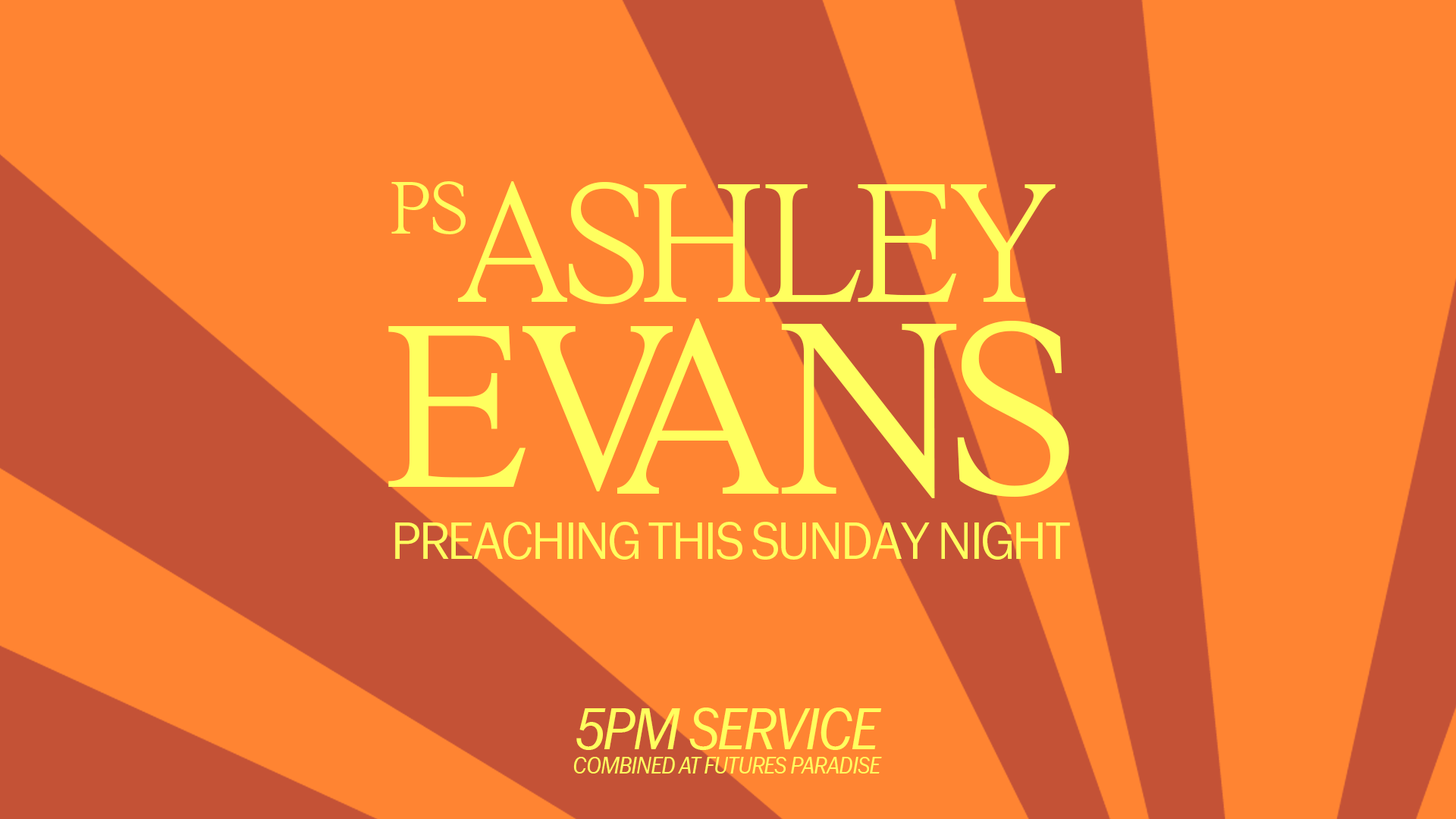
<style>
.page{position:relative;width:1456px;height:819px;background:#ff8432}
.page>*{position:absolute;margin:0}
.t1{font:275.6px/79.7px "RyhmesText-UltraLight";letter-spacing:-0.04em;color:#ffff5f}
.t2{font:378.3px/150.6px "RyhmesText-Light";letter-spacing:-0.02em;color:#ffff5f}
.t3{font:398.8px/150.6px "RyhmesText-Light";letter-spacing:-0.04em;color:#ffff5f}
.t4{font:121.8px "RyhmesText-UltraLight";letter-spacing:-0.04em;color:#ffff5f}
.t5{font:53.8px "GalGothic-Regular";letter-spacing:-0.04em;color:#ffff5f;scale:0.96 1}
.t6{font:104.2px "GalGothic-Italic";letter-spacing:-0.04em;color:#ffff5f}
.t7{font:41.7px "GalGothic-Italic";letter-spacing:-0.04em;color:#ffff5f}
</style>
<div class="page">
<p class="t1" style="left:388px;top:181px;width:681px;height:317px;text-align:center">ASHLEY <br><span class="t2">EV</span><span class="t3">ANS</span></p>
<p class="t4" style="left:391px;top:181px;width:75px;height:53px">PS</p>
<p class="t5" style="left:395px;top:522px;width:675px;height:38px">PREACHING THIS SUNDAY NIGHT</p>
<p class="t6" style="left:576px;top:708px;width:306px;height:42px">5PM SERVICE</p>
<p class="t7" style="left:573px;top:757px;width:309px;height:16px">COMBINED AT FUTURES PARADISE</p>
</div>
